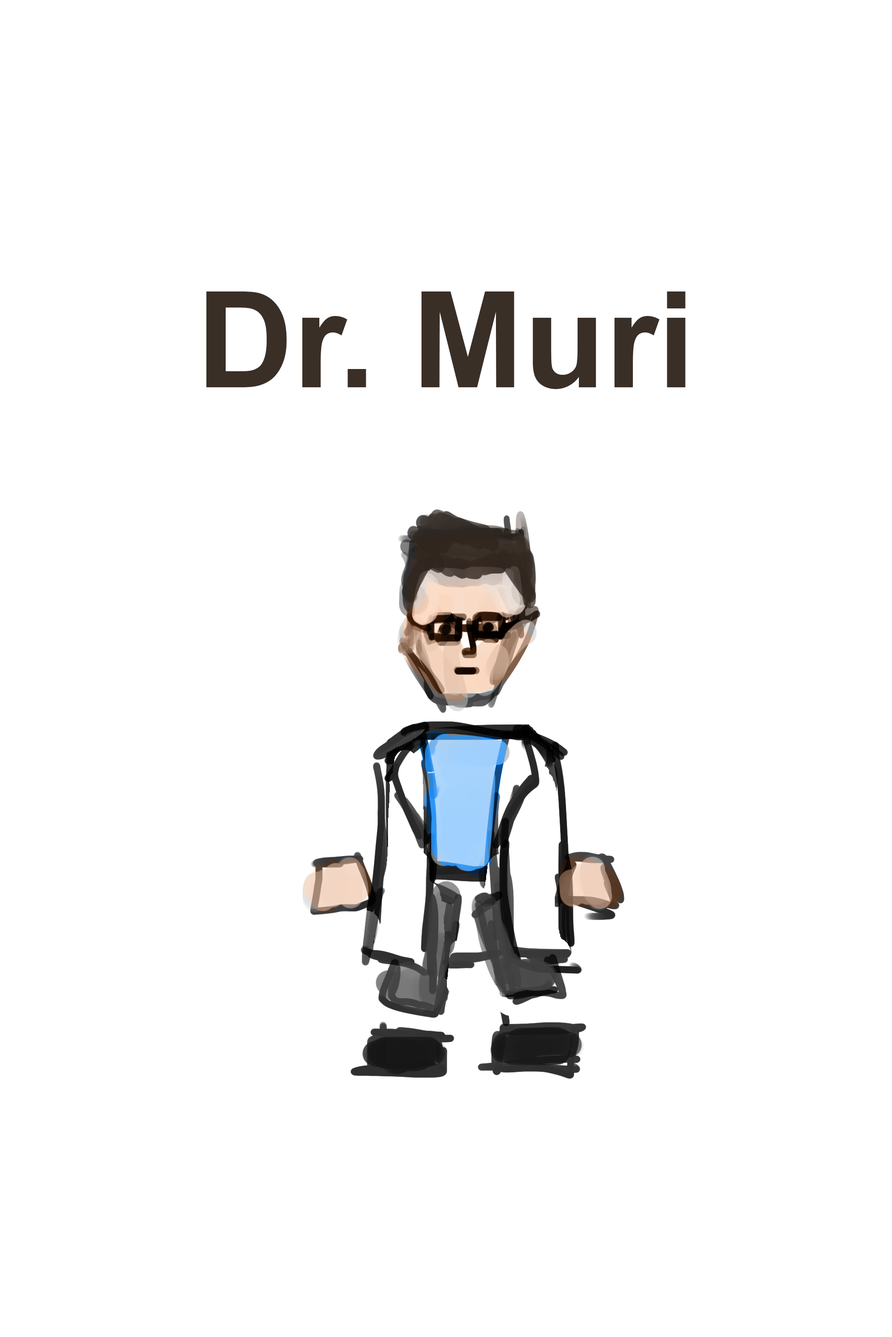
<style>
.page{position:relative;width:892px;height:1337px;background:#ffffff}
.page>*{position:absolute;margin:0}
.t1{font:133.7px "Arial-BoldMT";color:#392f27}
</style>
<div class="page">
<p class="t1" style="left:206px;top:292px;width:479px;height:97px">Dr. Muri</p>
</div>
